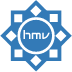
<style>
.page{position:relative;width:72px;height:72px;background:#ffffff}
.page>*{position:absolute;margin:0}
.t1{font:12px "Audiowide-Regular";color:#ffffff}
</style>
<div class="page">
<p class="t1" style="left:23px;top:29px;width:27px;height:10px">hmv</p>
</div>
